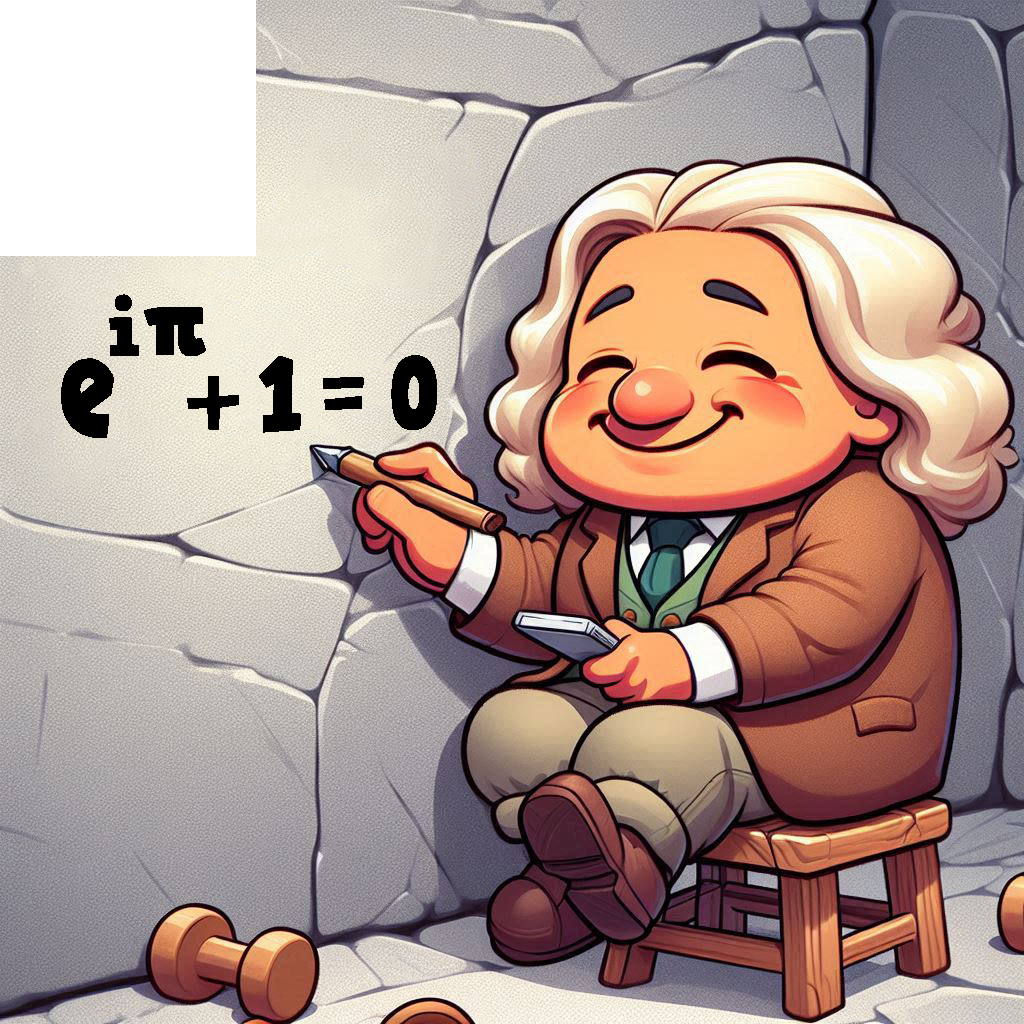
<style>
.page{position:relative;width:1024px;height:1024px}
.page>*{position:absolute;margin:0}
.t1{font:80px "HVDComicSerifPro";color:#000000}
.t2{font:93.3px "HVDComicSerifPro";color:#000000}
.t3{font:149.3px "HVDComicSerifPro";color:#000000;scale:0.75 1}
.t4{font:102.7px "HVDComicSerifPro";color:#000000;scale:0.91 1}
.t5{font:102.7px "HVDComicSerifPro";color:#000000;scale:0.82 1}
</style>
<div class="page">
<p class="t1" style="left:109px;top:294px;width:97px;height:62px">i<span class="t2">π</span></p>
<p class="t3" style="left:61px;top:358px;width:53px;height:80px">e</p>
<p class="t4" style="left:259px;top:356px;width:42px;height:77px">1</p>
<p class="t5" style="left:391px;top:355px;width:46px;height:75px">0</p>
<p class="t2" style="left:187px;top:376px;width:52px;height:54px">+</p>
<p class="t4" style="left:323px;top:377px;width:41px;height:33px">=</p>
</div>
